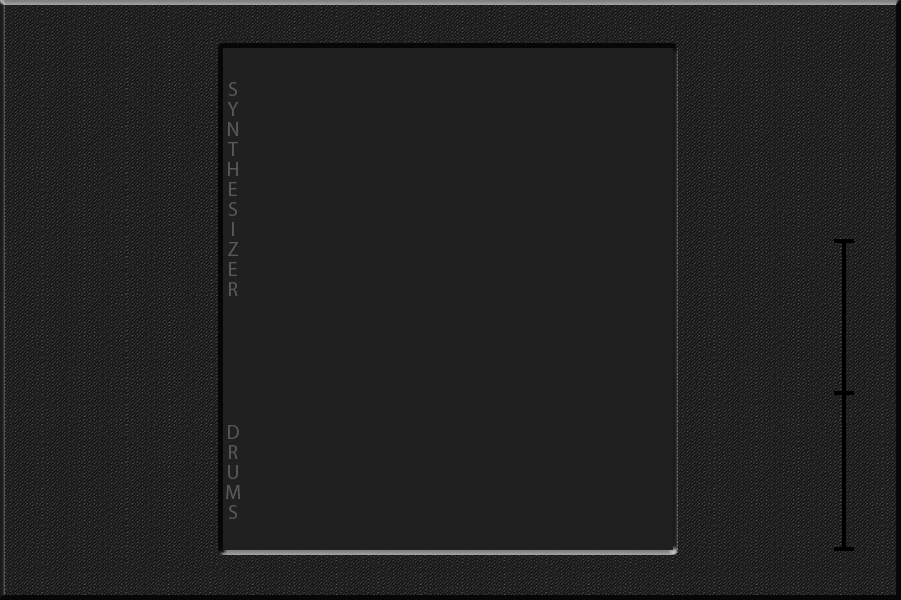
<style>
.page{position:relative;width:901px;height:600px;background:#202020}
.page>*{position:absolute;margin:0}
.t1{font:20px "MyriadPro-Regular";color:#585858}
</style>
<div class="page">
<p class="t1" style="left:226px;top:82px;width:14px;height:437px;text-align:center">SYNTHESIZER                             DRUMS</p>
</div>
